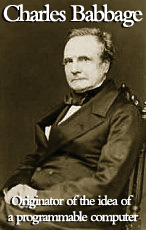
<style>
.page{position:relative;width:146px;height:230px}
.page>*{position:absolute;margin:0}
.t1{font:25px "BemboMT-SemiBold";letter-spacing:-0.08em;color:#ffffff;scale:0.95 1}
.t2{font:14.6px/16px "BemboMT-SemiBold";letter-spacing:-0.08em;color:#ffffff;scale:0.95 1}
</style>
<div class="page">
<p class="t1" style="left:3px;top:4px;width:140px;height:23px">Charles Babbage</p>
<p class="t2" style="left:8px;top:195px;width:131px;height:30px;text-align:center">Originator of the idea of <br>a programmable computer</p>
</div>
